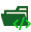
<style>
.page{position:relative;width:31px;height:32px;background:#ffffff}
.page>*{position:absolute;margin:0}
.t1{font:16px "Consolas";letter-spacing:-0.14em;color:#06cc14;font-weight:bold;scale:0.85 1}
</style>
<div class="page">
<p class="t1" style="left:13px;top:17px;width:18px;height:14px">&lt;/&gt;</p>
</div>
